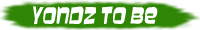
<style>
.page{position:relative;width:200px;height:30px;background:#2f8504}
.page>*{position:absolute;margin:0}
.t1{font:20.7px "Baveuse";color:#ffffff;font-style:italic;scale:0.78 1}
</style>
<div class="page">
<p class="t1" style="left:33px;top:6px;width:125px;height:19px">YondZ to be</p>
</div>
